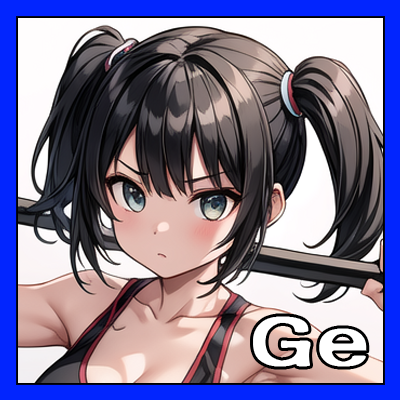
<style>
.page{position:relative;width:400px;height:400px}
.page>*{position:absolute;margin:0}
.t1{font:74.2px "YetR-HM";color:#ffffff;font-weight:bold;scale:1.33 1}
</style>
<div class="page">
<p class="t1" style="left:251px;top:315px;width:117px;height:53px">Ge</p>
</div>
